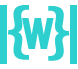
<style>
.page{position:relative;width:78px;height:69px;background:#ffffff}
.page>*{position:absolute;margin:0}
.t1{font:67.1px "MyriadPro-Regular";color:#2dcfcf;font-weight:bold;scale:1.18 1}
.t2{font:57.3px "Arial-BoldMT";color:#2dcfcf;font-weight:bold;scale:0.68 1}
</style>
<div class="page">
<p class="t1" style="left:8px;top:5px;width:21px;height:55px">{</p>
<p class="t1" style="left:48px;top:6px;width:22px;height:55px;rotate:180deg">{</p>
<p class="t2" style="left:22px;top:18px;width:32px;height:31px">w</p>
</div>
